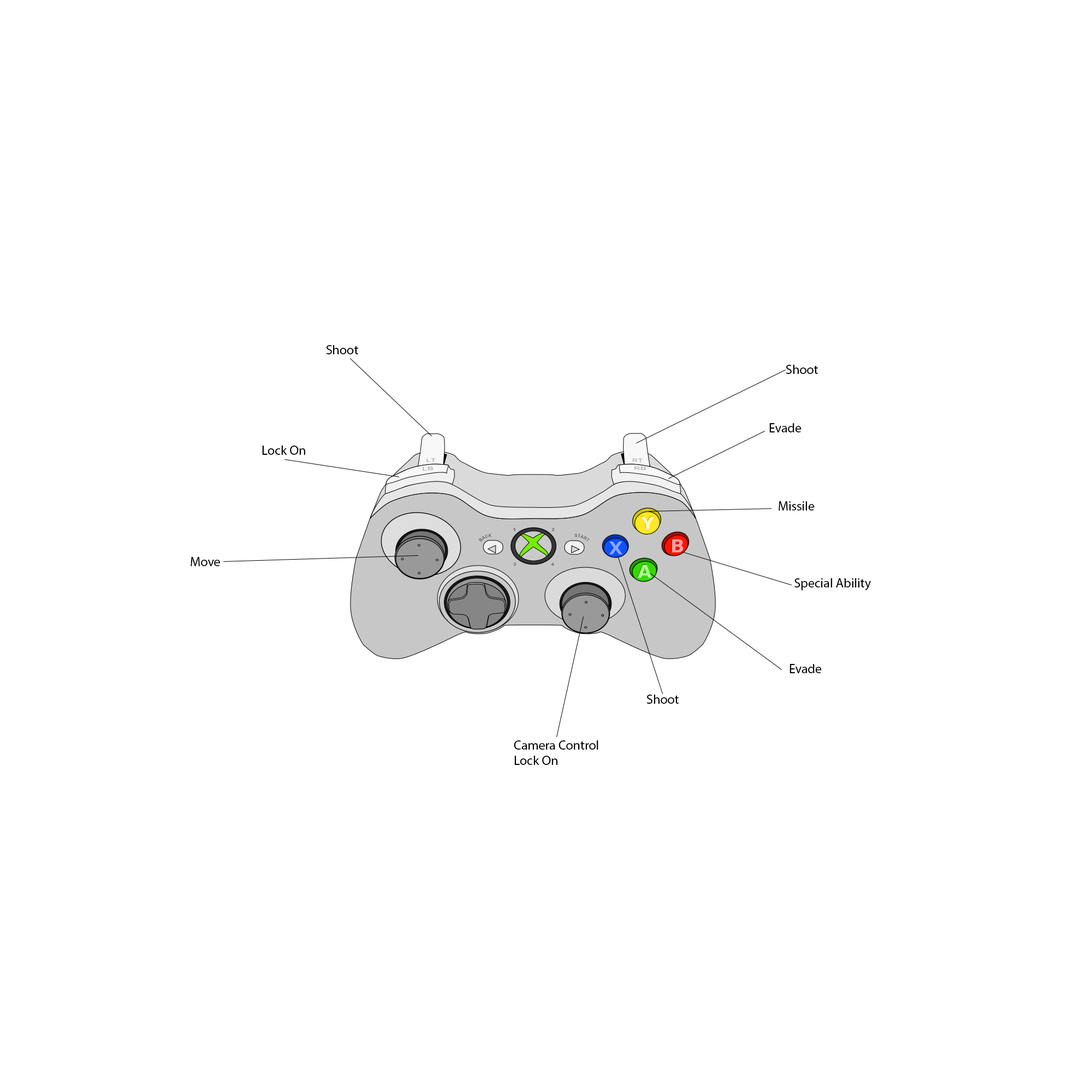
<style>
.page{position:relative;width:1092px;height:1092px;background:#ffffff}
.page>*{position:absolute;margin:0}
.t1{font:13.1px "MyriadPro-Regular";color:#000000}
</style>
<div class="page">
<p class="t1" style="left:326px;top:345px;width:32px;height:9px">Shoot</p>
<p class="t1" style="left:786px;top:365px;width:32px;height:9px">Shoot</p>
<p class="t1" style="left:769px;top:423px;width:33px;height:9px">Evade</p>
<p class="t1" style="left:262px;top:446px;width:43px;height:9px">Lock On</p>
<p class="t1" style="left:779px;top:501px;width:36px;height:10px">Missile</p>
<p class="t1" style="left:191px;top:557px;width:29px;height:9px">Move</p>
<p class="t1" style="left:794px;top:578px;width:77px;height:12px">Special Ability</p>
<p class="t1" style="left:790px;top:664px;width:32px;height:9px">Evade</p>
<p class="t1" style="left:646px;top:695px;width:33px;height:9px">Shoot</p>
<p class="t1" style="left:514px;top:740px;width:84px;height:25px">Camera Control<br>Lock On</p>
</div>
